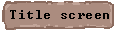
<style>
.page{position:relative;width:116px;height:30px;background:#ab8c7f}
.page>*{position:absolute;margin:0}
.t1{font:13px "Terminal";letter-spacing:0.04em;color:#000000}
</style>
<div class="page">
<p class="t1" style="left:10px;top:10px;width:99px;height:9px">Title screen</p>
</div>
